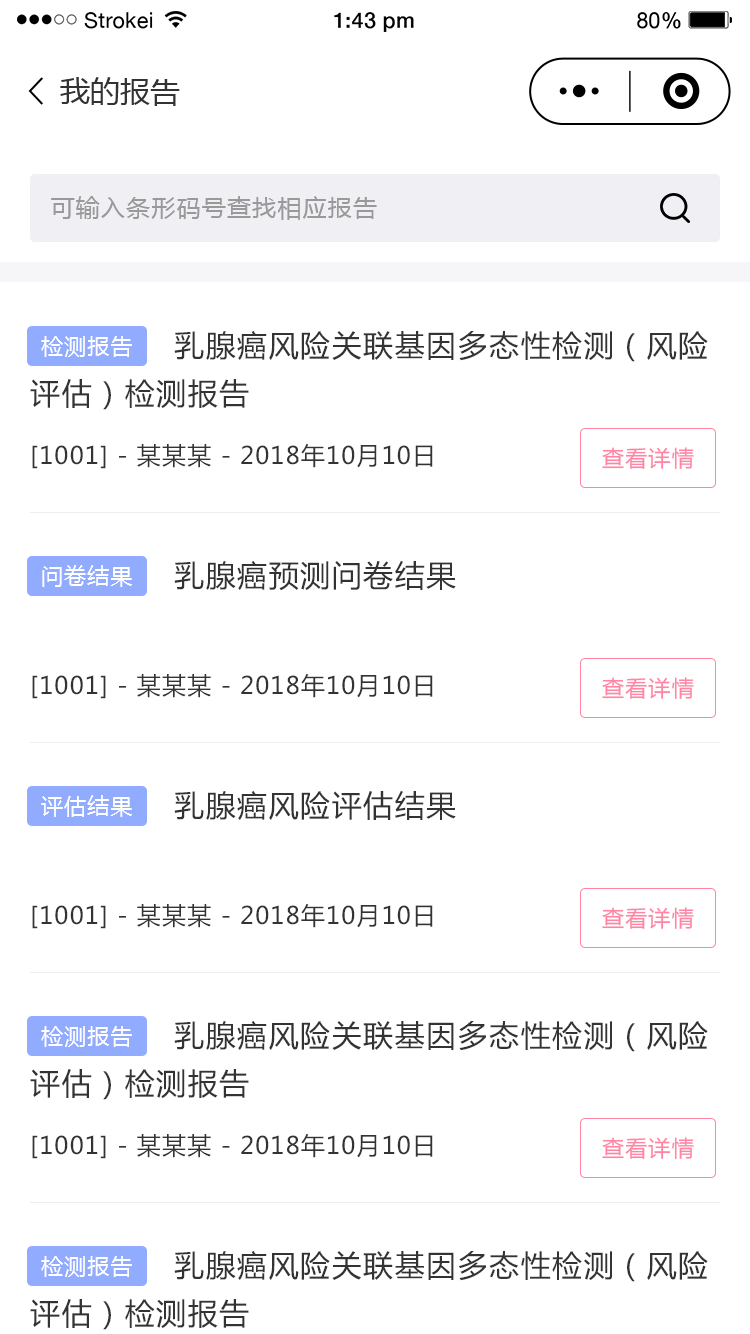
<style>
.page{position:relative;width:750px;height:1334px;background:#ffffff}
.page>*{position:absolute;margin:0}
.t1{font:30px "MicrosoftYaHei";color:#333333}
.t2{font:24px "MicrosoftYaHei";letter-spacing:0.05em;color:#999999}
.t3{font:24px/60px "MicrosoftYaHei";letter-spacing:0.05em;color:#333333}
.t4{font:30px/48px "MicrosoftYaHei";letter-spacing:0.05em;color:#333333}
.t5{font:22px "MicrosoftYaHei";letter-spacing:0.05em;color:#ffffff}
.t6{font:22px "MicrosoftYaHei";letter-spacing:0.05em;color:#ff85a2}
</style>
<div class="page">
<p class="t1" style="left:60px;top:77px;width:120px;height:29px">我的报告</p>
<p class="t2" style="left:51px;top:196px;width:326px;height:24px">可输入条形码号查找相应报告</p>
<p class="t3" style="left:30px;top:331px;width:678px;height:138px"><span class="t4">    乳腺癌风险关联基因多态性检测（风险评估）检测报告<br></span>[1001] - 某某某 - 2018年10月10日</p>
<p class="t5" style="left:41px;top:336px;width:91px;height:21px">检测报告</p>
<p class="t6" style="left:602px;top:447px;width:92px;height:22px">查看详情</p>
<p class="t3" style="left:32px;top:560px;width:424px;height:139px"><span class="t4">    乳腺癌预测问卷结果<br><br></span>[1001] - 某某某 - 2018年10月10日</p>
<p class="t5" style="left:42px;top:565px;width:90px;height:22px">问卷结果</p>
<p class="t6" style="left:602px;top:677px;width:92px;height:22px">查看详情</p>
<p class="t3" style="left:32px;top:790px;width:424px;height:139px"><span class="t4">    乳腺癌风险评估结果<br><br></span>[1001] - 某某某 - 2018年10月10日</p>
<p class="t5" style="left:41px;top:795px;width:91px;height:22px">评估结果</p>
<p class="t6" style="left:602px;top:907px;width:92px;height:22px">查看详情</p>
<p class="t3" style="left:30px;top:1021px;width:678px;height:138px"><span class="t4">    乳腺癌风险关联基因多态性检测（风险评估）检测报告<br></span>[1001] - 某某某 - 2018年10月10日</p>
<p class="t5" style="left:41px;top:1026px;width:91px;height:21px">检测报告</p>
<p class="t6" style="left:602px;top:1137px;width:92px;height:22px">查看详情</p>
<p class="t5" style="left:41px;top:1256px;width:91px;height:21px">检测报告</p>
</div>
